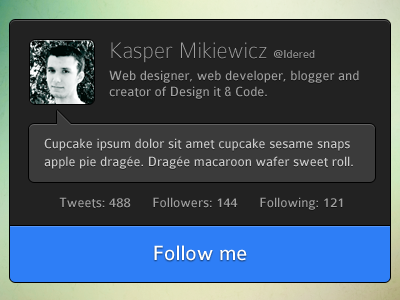
<style>
.page{position:relative;width:400px;height:300px;background:#222222}
.page>*{position:absolute;margin:0}
.t1{font:14px "Colaborate-Regular";color:#a0a0a0}
.t2{font:24px "Colaborate-Thin";color:#a0a0a0}
.t3{font:12px "Colaborate-Regular";color:#a0a0a0}
.t4{font:14px/18px "Colaborate-Regular";color:#cccccc}
.t5{font:22px "Colaborate-Regular";color:#ffffff}
</style>
<div class="page">
<p class="t1" style="left:109px;top:42px;width:250px;height:57px"><span class="t2">Kasper Mikiewicz </span><span class="t3">@Idered<br></span>Web designer, web developer, blogger and creator of Design it &amp; Code.</p>
<p class="t4" style="left:44px;top:138px;width:309px;height:31px">Cupcake ipsum dolor sit amet cupcake sesame snaps apple pie dragée. Dragée macaroon wafer sweet roll.</p>
<p class="t1" style="left:59px;top:197px;width:284px;height:13px">Tweets: 488      Followers: 144      Following: 121</p>
<p class="t5" style="left:154px;top:245px;width:93px;height:16px">Follow me</p>
</div>
